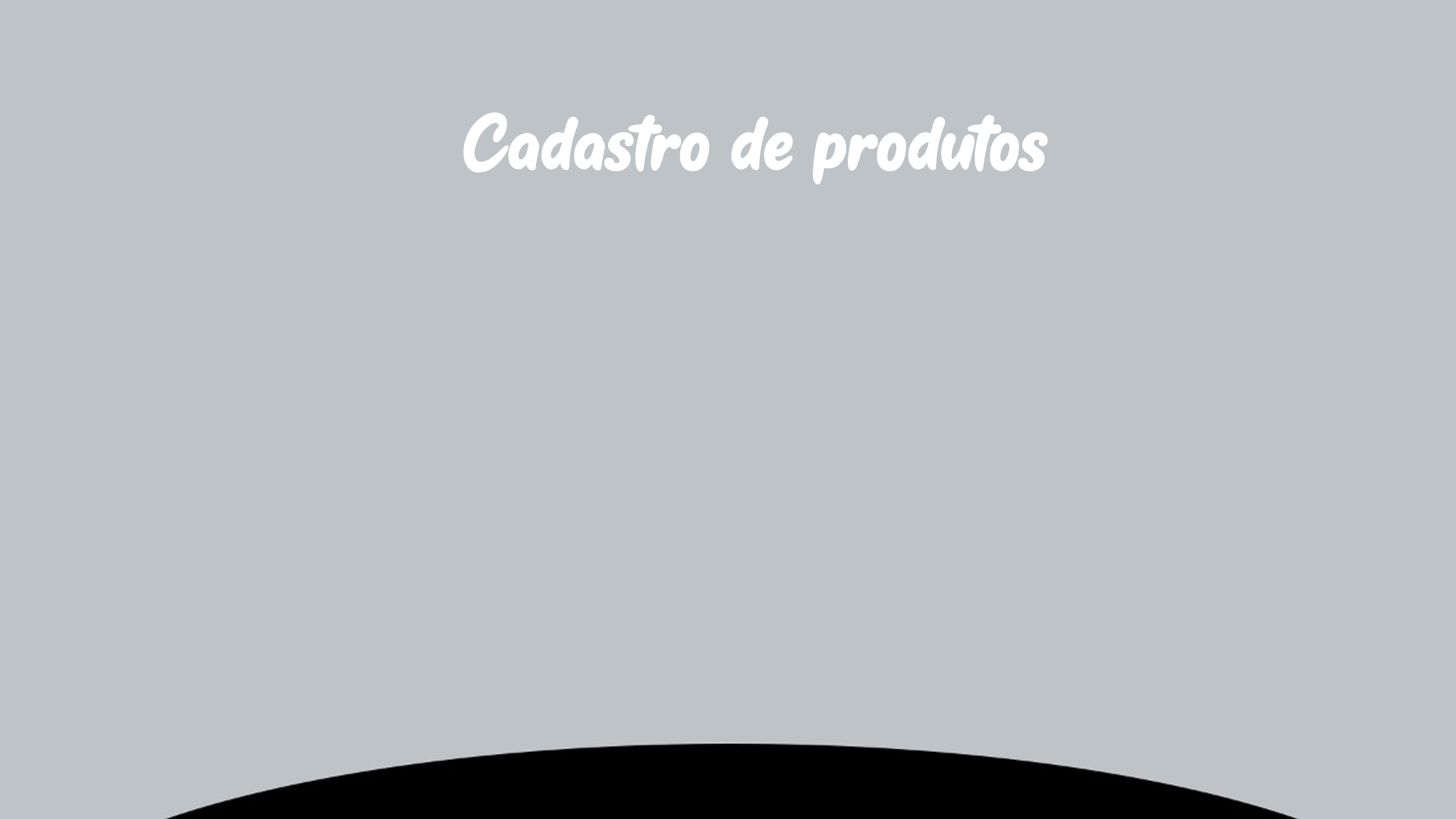
<style>
.page{position:relative;width:1456px;height:819px;background:#bec3c7}
.page>*{position:absolute;margin:0}
.t1{font:80px "KestoySelfie";color:#ffffff}
</style>
<div class="page">
<p class="t1" style="left:463px;top:112px;width:585px;height:73px">Cadastro de produtos</p>
</div>
